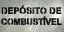
<style>
.page{position:relative;width:64px;height:32px}
.page>*{position:absolute;margin:0}
.t1{font:8.9px/11px "Arial-BoldMT";text-transform:uppercase;font-weight:bold;scale:0.96 1}
.t2{font:8.9px/11px "Arial-BoldMT";letter-spacing:-0.04em;text-transform:uppercase;font-weight:bold;scale:0.96 1}
</style>
<div class="page">
<p class="t1" style="left:1px;top:5px;width:61px;height:21px;text-align:center">DEPÓSITO DE<br><span class="t2">COMBUSTÍVEL</span></p>
</div>
